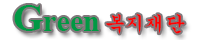
<style>
.page{position:relative;width:200px;height:40px;background:#ffffff}
.page>*{position:absolute;margin:0}
.t1{font:30px "TimesNewRomanPS-BoldMT";color:#009944}
.t2{font:39px "TimesNewRomanPS-BoldMT";color:#009944}
.t3{font:20px "GungsuhChe";color:#ff0000}
</style>
<div class="page">
<p class="t1" style="left:14px;top:5px;width:171px;height:29px"><span class="t2">G</span>reen <span class="t3">복지재단</span></p>
</div>
